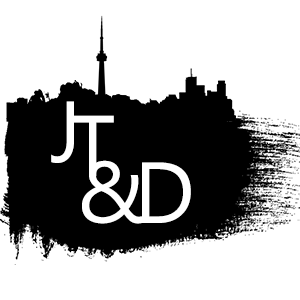
<style>
.page{position:relative;width:300px;height:300px;background:#ffffff}
.page>*{position:absolute;margin:0}
.t1{font:86.2px "Gadugi";color:#ffffff}
</style>
<div class="page">
<p class="t1" style="left:51px;top:101px;width:23px;height:62px">J</p>
<p class="t1" style="left:71px;top:115px;width:43px;height:62px">T</p>
<p class="t1" style="left:82px;top:160px;width:63px;height:64px">&amp;</p>
<p class="t1" style="left:142px;top:162px;width:49px;height:61px">D</p>
</div>
